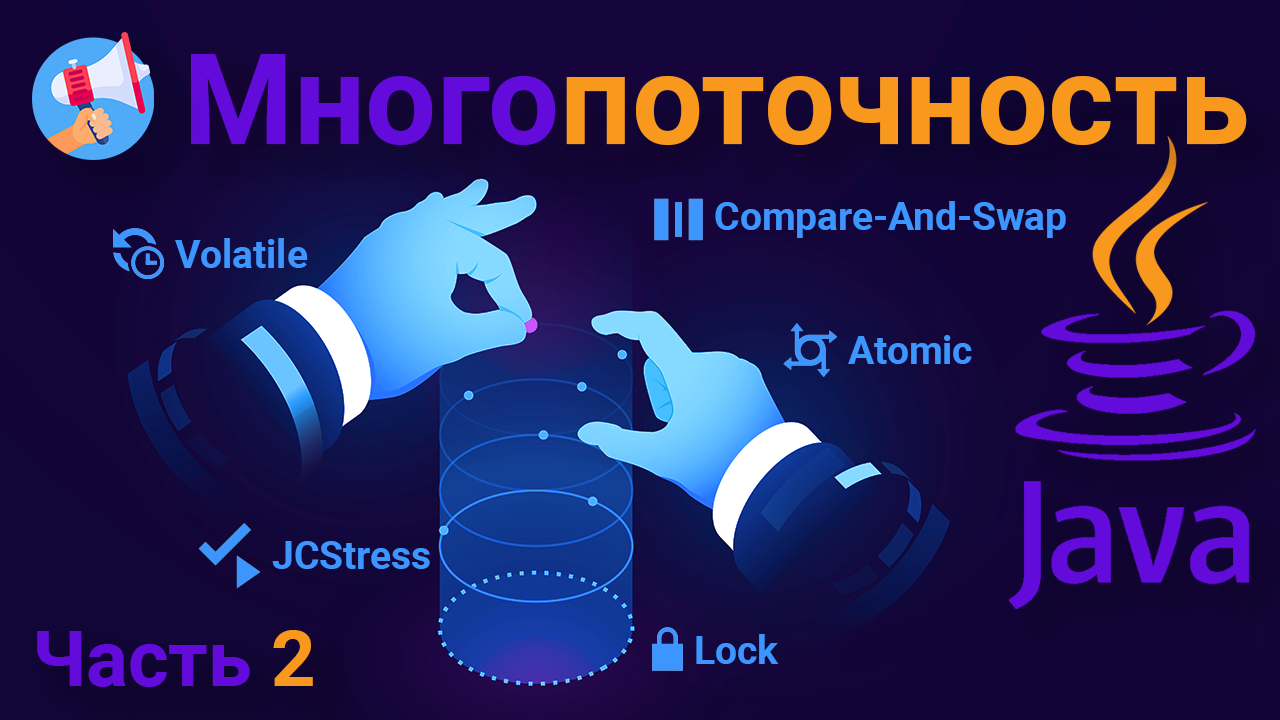
<style>
.page{position:relative;width:1280px;height:720px}
.page>*{position:absolute;margin:0}
.t1{font:126.4px "Roboto-Bold";color:#f8981d}
.t2{font:126.4px "Roboto-Bold";color:#630bdb}
.t3{font:38.9px "Roboto-Bold";color:#3d96ff}
.t4{font:77.8px "Roboto-Bold";color:#630bdb}
.t5{font:77.8px "Roboto-Bold";color:#f8981d}
</style>
<div class="page">
<p class="t1" style="left:191px;top:54px;width:1056px;height:91px"><span class="t2">Много</span>поточность</p>
<p class="t3" style="left:715px;top:201px;width:351px;height:37px">Compare-And-Swap</p>
<p class="t3" style="left:175px;top:238px;width:133px;height:30px">Volatile</p>
<p class="t3" style="left:848px;top:335px;width:124px;height:29px">Atomic</p>
<p class="t3" style="left:272px;top:541px;width:158px;height:28px">JCStress</p>
<p class="t4" style="left:37px;top:630px;width:276px;height:57px">Часть <span class="t5">2</span></p>
<p class="t3" style="left:696px;top:634px;width:83px;height:30px">Lock</p>
</div>
